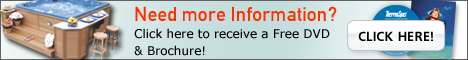
<style>
.page{position:relative;width:468px;height:60px}
.page>*{position:absolute;margin:0}
.t1{font:12px/17px "Verdana";color:#000000}
.t2{font:20px/17px "DinC";color:#ff3000}
.t3{font:13px "font180";color:#000000}
</style>
<div class="page">
<p class="t1" style="left:134px;top:6px;width:203px;height:50px"><span class="t2">Need more Information?<br></span>Click here to receive a Free DVD  <br>&amp; Brochure!</p>
<p class="t3" style="left:358px;top:31px;width:75px;height:10px">CLICK HERE!</p>
</div>
